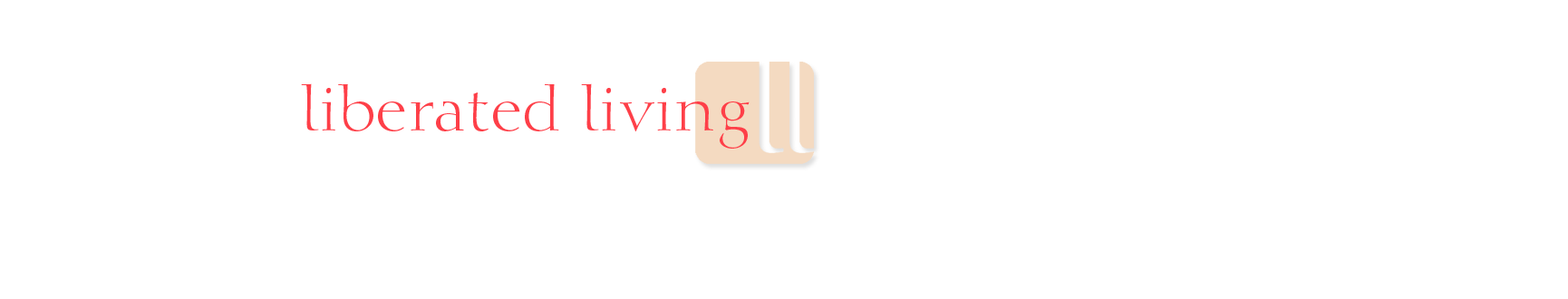
<style>
.page{position:relative;width:1568px;height:299px;background:#ffffff}
.page>*{position:absolute;margin:0}
.t1{font:60.4px "Calligraphic810BT-Roman";color:#fe3f48}
</style>
<div class="page">
<p class="t1" style="left:301px;top:83px;width:449px;height:66px">liberated living</p>
</div>
